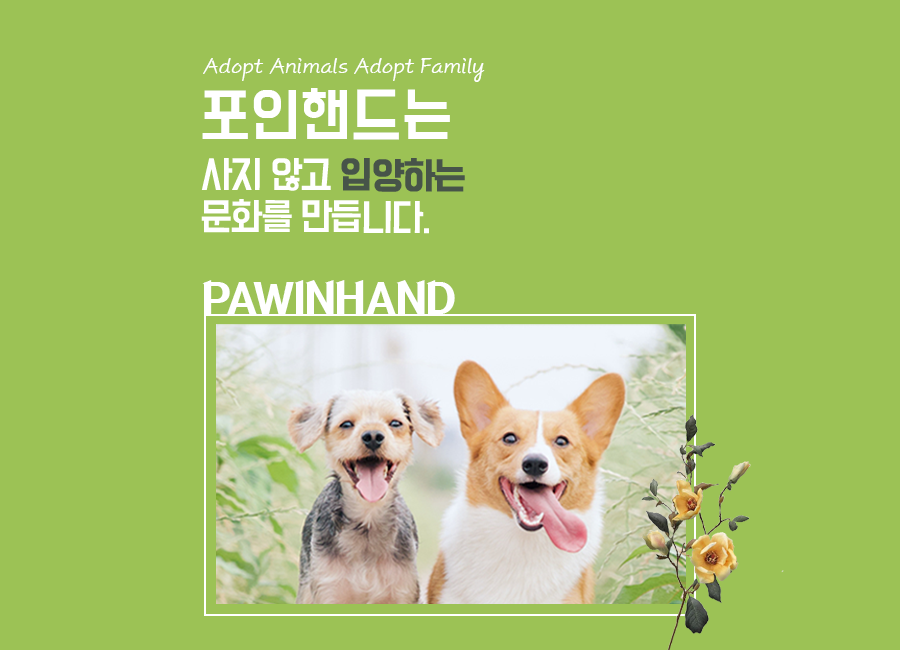
<style>
.page{position:relative;width:900px;height:650px;background:#9cc255}
.page>*{position:absolute;margin:0}
.t1{font:23.9px "KimjungchulScript-Regular";color:#ffffff;scale:0.94 1}
.t2{font:52.6px "BMDoHyeon";color:#ffffff}
.t3{font:33.8px/42.1px "BMDoHyeon";letter-spacing:-0.06em;color:#ffffff}
.t4{font:33.8px/42.1px "BMDoHyeon";letter-spacing:-0.06em;color:#475449;font-weight:bold}
.t5{font:45.6px "KOTRA-LEAP";color:#ffffff}
</style>
<div class="page">
<p class="t1" style="left:203px;top:58px;width:282px;height:24px">Adopt Animals Adopt Family</p>
<p class="t2" style="left:202px;top:88px;width:248px;height:52px">포인핸드는</p>
<p class="t3" style="left:201px;top:158px;width:264px;height:76px">사지 않고 <span class="t4">입양하는<br></span>문화를 만듭니다.</p>
<p class="t5" style="left:202px;top:280px;width:253px;height:34px">PAWINHAND</p>
</div>
